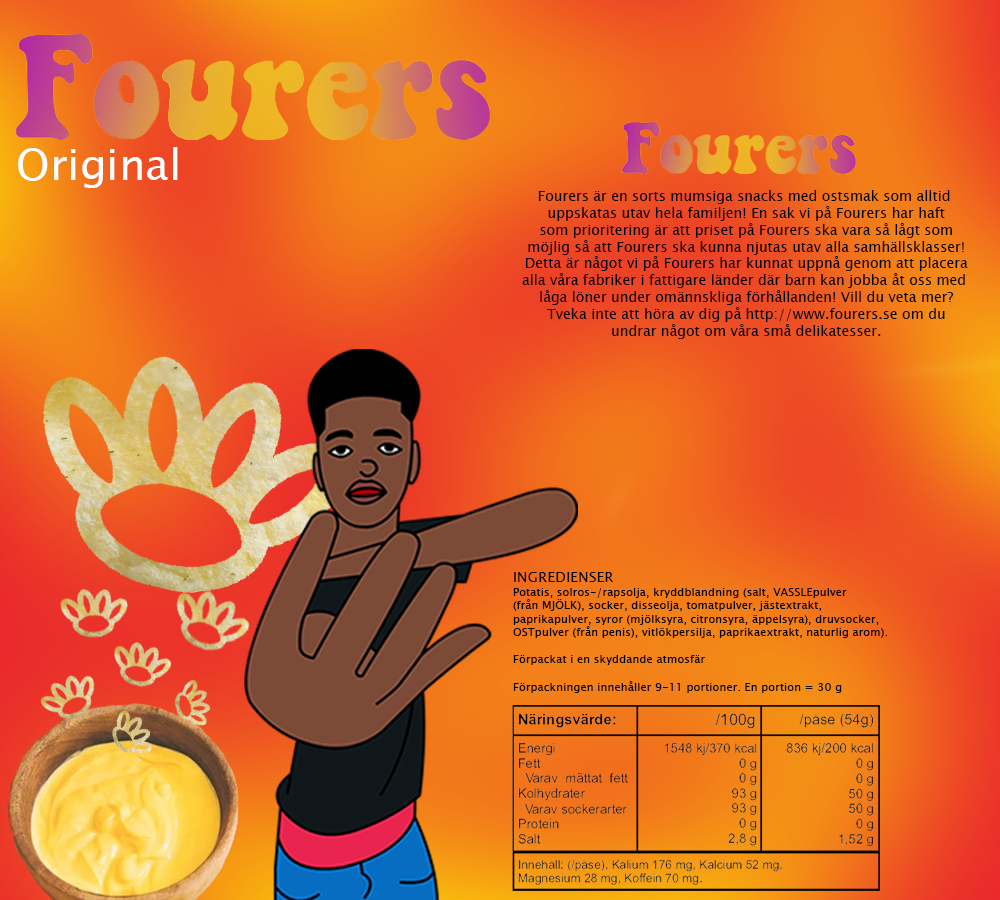
<style>
.page{position:relative;width:1000px;height:900px}
.page>*{position:absolute;margin:0}
.t1{font:42.9px "LucidaSansUnicode";color:#ffffff}
.t2{font:14px "LucidaSansUnicode";color:#000000}
.t3{font:11.3px "LucidaSansUnicode";color:#000000}
.t4{font:14.5px "LucidaSansUnicode";color:#000000}
</style>
<div class="page">
<p class="t1" style="left:18px;top:147px;width:160px;height:41px">Original</p>
<p class="t2" style="left:522px;top:190px;width:446px;height:149px;text-align:center">Fourers är en sorts mumsiga snacks med ostsmak som alltid <br>uppskatas utav hela familjen! En sak vi på Fourers har haft<br>som prioritering är att priset på Fourers ska vara så lågt som<br>möjlig så att Fourers ska kunna njutas utav alla samhällsklasser!<br>Detta är något vi på Fourers har kunnat uppnå genom att placera<br>alla våra fabriker i fattigare länder där barn kan jobba åt oss med <br>låga löner under omännskliga förhållanden! Vill du veta mer?<br>Tveka inte att höra av dig på http://www.fourers.se om du<br>undrar något om våra små delikatesser.</p>
<p class="t3" style="left:513px;top:572px;width:374px;height:121px"><span class="t4">INGREDIENSER<br></span>Potatis, solros-/rapsolja, kryddblandning (salt, VASSLEpulver<br>(från MJÖLK), socker, disseolja, tomatpulver, jästextrakt,<br>paprikapulver, syror (mjölksyra, citronsyra, äppelsyra), druvsocker,<br>OSTpulver (från penis), vitlökpersilja, paprikaextrakt, naturlig arom). <br><br>Förpackat i en skyddande atmosfär<br><br>Förpackningen innehåller 9-11 portioner. En portion = 30 g</p>
</div>
